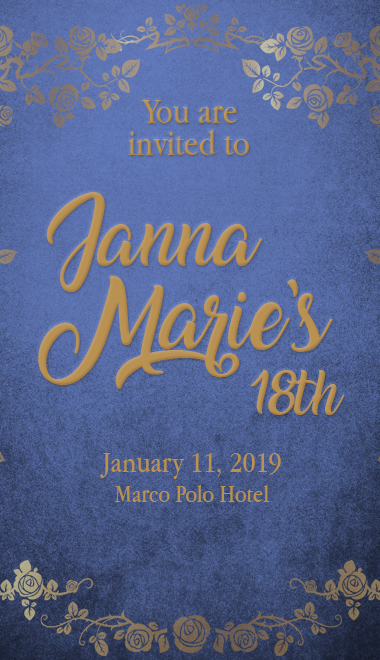
<style>
.page{position:relative;width:380px;height:660px}
.page>*{position:absolute;margin:0}
.t1{font:36px "AppleGaramond";color:#b99151}
.t2{font:55px "Amarillo";color:#b99151}
.t3{font:60px "Amarillo";color:#b99151}
.t4{font:40px "Amarillo";color:#b99151}
.t5{font:30px "AppleGaramond";color:#b99151}
.t6{font:25px "AppleGaramond";color:#b99151}
</style>
<div class="page">
<p class="t1" style="left:141px;top:100px;width:96px;height:23px">You are</p>
<p class="t1" style="left:128px;top:130px;width:121px;height:25px">invited to</p>
<p class="t2" style="left:46px;top:192px;width:217px;height:100px;text-align:center">Janna</p>
<p class="t3" style="left:38px;top:276px;width:295px;height:113px;text-align:center">Marie’s</p>
<p class="t4" style="left:250px;top:370px;width:95px;height:46px">18th</p>
<p class="t5" style="left:100px;top:453px;width:181px;height:49px;text-align:center">January 11, 2019<br><span class="t6">Marco Polo Hotel</span></p>
</div>
